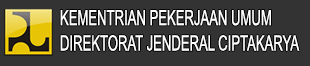
<style>
.page{position:relative;width:310px;height:66px;background:#333333}
.page>*{position:absolute;margin:0}
.t1{font:21.1px "ArialNarrow";color:#fefefe;scale:0.76 1}
</style>
<div class="page">
<p class="t1" style="left:60px;top:10px;width:240px;height:41px">KEMENTRIAN PEKERJAAN UMUM<br>DIREKTORAT JENDERAL CIPTAKARYA</p>
</div>
